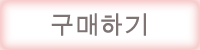
<style>
.page{position:relative;width:200px;height:50px;background:#ffffff}
.page>*{position:absolute;margin:0}
.t1{font:24.6px "ArialUnicodeMS";color:#7e7474}
</style>
<div class="page">
<p class="t1" style="left:51px;top:13px;width:95px;height:23px">구매하기</p>
</div>
